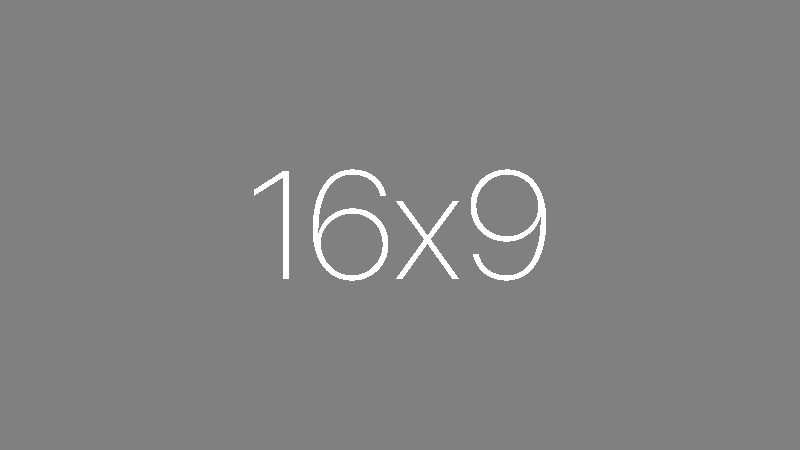
<style>
.page{position:relative;width:800px;height:450px;background:#808080}
.page>*{position:absolute;margin:0}
.t1{font:153.3px "SFPro-Thin";color:#ffffff}
</style>
<div class="page">
<p class="t1" style="left:254px;top:169px;width:292px;height:112px">16x9</p>
</div>
